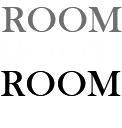
<style>
.page{position:relative;width:122px;height:128px;background:#ffffff}
.page>*{position:absolute;margin:0}
.t1{font:38px "BaskOldFace";color:#706f70}
.t2{font:38px "BaskOldFace";color:#000000}
</style>
<div class="page">
<p class="t1" style="left:2px;top:7px;width:120px;height:25px">ROOM</p>
<p class="t2" style="left:1px;top:71px;width:120px;height:25px">ROOM</p>
</div>
